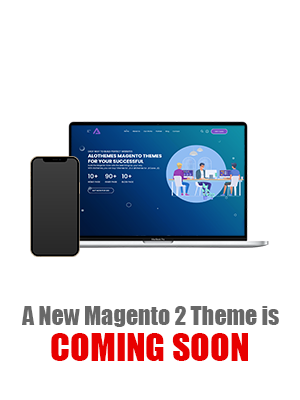
<style>
.page{position:relative;width:300px;height:400px;background:#ffffff}
.page>*{position:absolute;margin:0}
.t1{font:24px "Impact";color:#686868}
.t2{font:36px "Impact";color:#e80000}
</style>
<div class="page">
<p class="t1" style="left:22px;top:306px;width:257px;height:21px">A New Magento 2 Theme is</p>
<p class="t2" style="left:51px;top:333px;width:197px;height:28px">COMING SOON</p>
</div>
